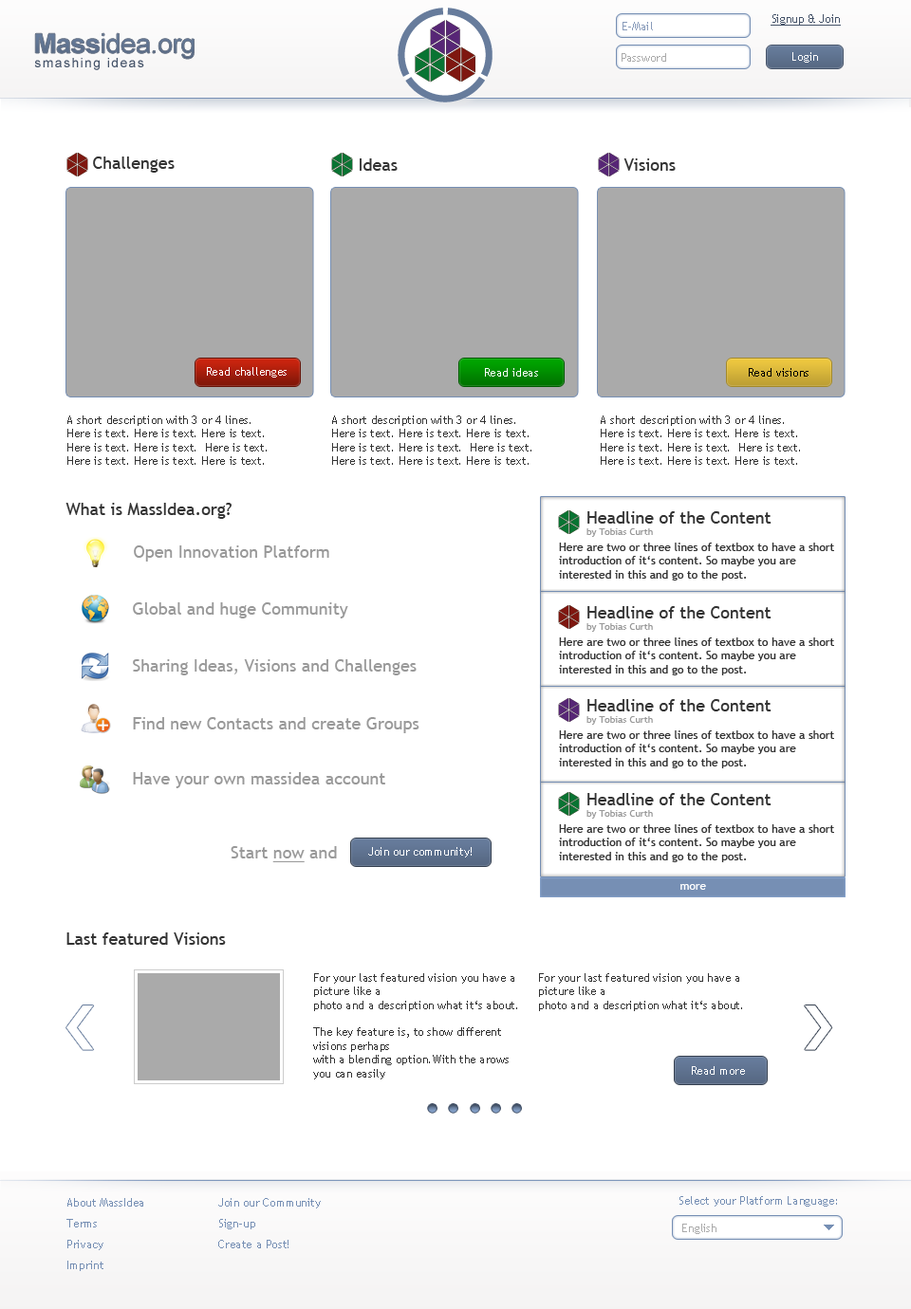
<style>
.page{position:relative;width:911px;height:1309px;background:#ffffff}
.page>*{position:absolute;margin:0}
.t1{font:11.4px "TrebuchetMS";color:#455369;text-decoration:underline}
.t2{font:11.4px "TrebuchetMS";color:#889bba}
.t3{font:27.6px "ArialMT";letter-spacing:-0.02em;color:#61738e}
.t4{font:27.6px "Arial-BoldMT";letter-spacing:-0.02em;color:#61738e}
.t5{font:11.4px "TrebuchetMS";color:#aaaaaa}
.t6{font:11.4px "TrebuchetMS";color:#ffffff}
.t7{font:13.3px "ArialMT";letter-spacing:0.1em;color:#455369}
.t8{font:17.1px "TrebuchetMS";color:#333333}
.t9{font:11.4px "TrebuchetMS";color:#000000}
.t10{font:11.4px "TrebuchetMS";color:#333333}
.t11{font:9.5px "TrebuchetMS";color:#999999}
.t12{font:17.1px "TrebuchetMS";color:#999999}
.t13{font:17.1px "TrebuchetMS";color:#999999;text-decoration:underline}
.t14{font:11.4px/20.9px "TrebuchetMS";color:#768fb4}
.t15{font:11.4px "TrebuchetMS";color:#768fb4}
</style>
<div class="page">
<p class="t1" style="left:770px;top:14px;width:71px;height:12px">Signup &amp; Join</p>
<p class="t2" style="left:622px;top:22px;width:31px;height:8px">E-Mail</p>
<p class="t3" style="left:35px;top:33px;width:159px;height:26px"><span class="t4">Mass</span>idea.org</p>
<p class="t5" style="left:621px;top:53px;width:45px;height:9px">Password</p>
<p class="t6" style="left:792px;top:52px;width:26px;height:11px">Login</p>
<p class="t7" style="left:34px;top:58px;width:110px;height:12px">smashing ideas</p>
<p class="t8" style="left:93px;top:157px;width:82px;height:16px">Challenges</p>
<p class="t8" style="left:360px;top:158px;width:38px;height:13px">Ideas</p>
<p class="t8" style="left:623px;top:158px;width:52px;height:13px">Visions</p>
<p class="t6" style="left:207px;top:367px;width:80px;height:11px">Read challenges</p>
<p class="t6" style="left:485px;top:368px;width:53px;height:9px">Read ideas</p>
<p class="t9" style="left:749px;top:368px;width:59px;height:9px">Read visions</p>
<p class="t10" style="left:67px;top:416px;width:200px;height:49px">A short description with 3 or 4 lines.<br>Here is text. Here is text. Here is text.<br>Here is text. Here is text.  Here is text. <br>Here is text. Here is text. Here is text.</p>
<p class="t10" style="left:332px;top:416px;width:199px;height:49px">A short description with 3 or 4 lines.<br>Here is text. Here is text. Here is text.<br>Here is text. Here is text.  Here is text. <br>Here is text. Here is text. Here is text.</p>
<p class="t10" style="left:601px;top:416px;width:199px;height:49px">A short description with 3 or 4 lines.<br>Here is text. Here is text. Here is text.<br>Here is text. Here is text.  Here is text. <br>Here is text. Here is text. Here is text.</p>
<p class="t8" style="left:65px;top:503px;width:166px;height:16px">What is MassIdea.org?</p>
<p class="t8" style="left:586px;top:511px;width:185px;height:26px">Headline of the Content<br><span class="t11">by Tobias Curth</span></p>
<p class="t12" style="left:134px;top:546px;width:195px;height:16px">Open Innovation Platform</p>
<p class="t10" style="left:559px;top:543px;width:275px;height:38px">Here are two or three lines of textbox to have a short <br>introduction of it‘s content. So maybe you are <br>interested in this and go to the post.</p>
<p class="t12" style="left:133px;top:602px;width:215px;height:17px">Global and huge Community</p>
<p class="t8" style="left:586px;top:606px;width:185px;height:26px">Headline of the Content<br><span class="t11">by Tobias Curth</span></p>
<p class="t10" style="left:559px;top:638px;width:275px;height:37px">Here are two or three lines of textbox to have a short <br>introduction of it‘s content. So maybe you are <br>interested in this and go to the post.</p>
<p class="t12" style="left:133px;top:659px;width:283px;height:16px">Sharing Ideas, Visions and Challenges</p>
<p class="t8" style="left:586px;top:699px;width:185px;height:26px">Headline of the Content<br><span class="t11">by Tobias Curth</span></p>
<p class="t12" style="left:133px;top:717px;width:286px;height:16px">Find new Contacts and create Groups</p>
<p class="t10" style="left:559px;top:731px;width:275px;height:37px">Here are two or three lines of textbox to have a short <br>introduction of it‘s content. So maybe you are <br>interested in this and go to the post.</p>
<p class="t12" style="left:133px;top:772px;width:252px;height:16px">Have your own massidea account</p>
<p class="t8" style="left:586px;top:793px;width:185px;height:26px">Headline of the Content<br><span class="t11">by Tobias Curth</span></p>
<p class="t10" style="left:559px;top:824px;width:275px;height:38px">Here are two or three lines of textbox to have a short <br>introduction of it‘s content. So maybe you are <br>interested in this and go to the post.</p>
<p class="t12" style="left:231px;top:846px;width:106px;height:16px">Start <span class="t13">now</span> and</p>
<p class="t6" style="left:368px;top:847px;width:104px;height:11px">Join our community!</p>
<p class="t6" style="left:680px;top:884px;width:26px;height:6px">more</p>
<p class="t8" style="left:66px;top:933px;width:160px;height:12px">Last featured Visions</p>
<p class="t10" style="left:313px;top:973px;width:204px;height:107px">For your last featured vision you have a picture like a<br>photo and a description what it‘s about.<br><br>The key feature is, to show different visions perhaps <br>with a blending option.With the arows you can easily <br>navigate between them.<br><br>Optional this textbox can be divided into two or <br>more columns.</p>
<p class="t10" style="left:539px;top:973px;width:203px;height:38px">For your last featured vision you have a picture like a<br>photo and a description what it‘s about.</p>
<p class="t6" style="left:692px;top:1066px;width:53px;height:9px">Read more</p>
<p class="t14" style="left:66px;top:1198px;width:77px;height:73px">About MassIdea<br>Terms<br>Privacy<br>Imprint</p>
<p class="t14" style="left:218px;top:1198px;width:103px;height:51px">Join our Community<br>Sign-up<br>Create a Post!</p>
<p class="t15" style="left:679px;top:1196px;width:158px;height:11px">Select your Platform Language:</p>
<p class="t5" style="left:682px;top:1224px;width:34px;height:10px">English</p>
</div>
